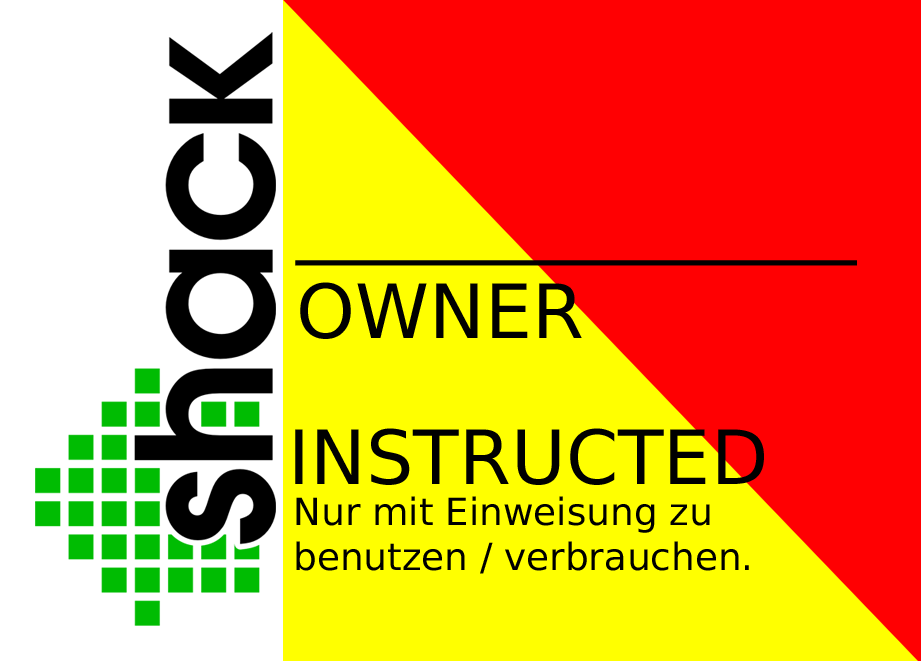
<style>
.page{position:relative;width:921px;height:661px;background:#ff0002}
.page>*{position:absolute;margin:0}
.t1{font:74.7px "PrimaSansBT-Roman";color:#000000}
.t2{font:37.4px "PrimaSansBT-Roman";color:#000000}
</style>
<div class="page">
<p class="t1" style="left:295px;top:260px;width:562px;height:79px">_______________<br>OWNER</p>
<p class="t1" style="left:295px;top:428px;width:469px;height:57px">INSTRUCTED</p>
<p class="t2" style="left:296px;top:496px;width:453px;height:78px">Nur mit Einweisung zu<br>benutzen / verbrauchen.</p>
</div>
